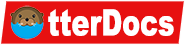
<style>
.page{position:relative;width:185px;height:45px;background:#e71010}
.page>*{position:absolute;margin:0}
.t1{font:36.4px "Arial-Black";color:#ffffff;scale:0.74 1}
</style>
<div class="page">
<p class="t1" style="left:48px;top:9px;width:126px;height:27px">tterDocs</p>
</div>
